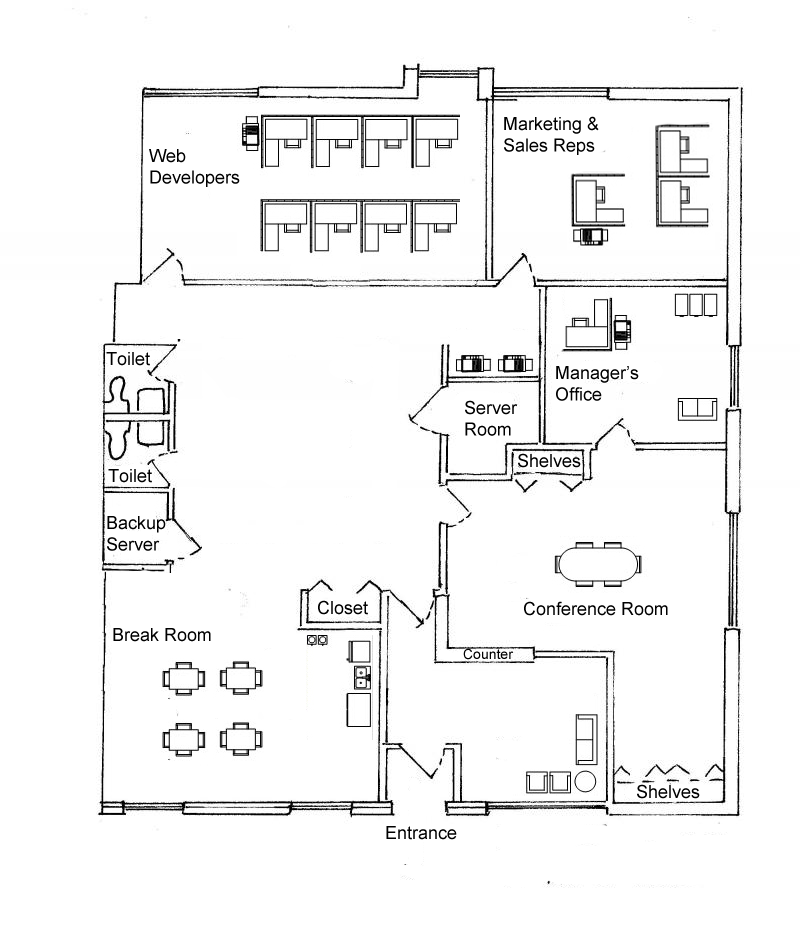
<style>
.page{position:relative;width:800px;height:940px;background:#ffffff}
.page>*{position:absolute;margin:0}
.t1{font:18px "ArialMT";color:#000000}
.t2{font:14px "ArialMT";color:#000000}
</style>
<div class="page">
<p class="t1" style="left:504px;top:116px;width:95px;height:39px">Marketing &amp;<br>Sales Reps</p>
<p class="t1" style="left:149px;top:149px;width:91px;height:38px">Web<br>Developers</p>
<p class="t1" style="left:106px;top:352px;width:44px;height:14px">Toilet</p>
<p class="t1" style="left:556px;top:366px;width:83px;height:35px">Manager’s<br>Office</p>
<p class="t1" style="left:465px;top:400px;width:53px;height:36px">Server<br>Room</p>
<p class="t1" style="left:518px;top:453px;width:63px;height:15px">Shelves</p>
<p class="t1" style="left:108px;top:469px;width:44px;height:14px">Toilet</p>
<p class="t1" style="left:107px;top:516px;width:59px;height:35px">Backup<br>Server</p>
<p class="t1" style="left:318px;top:600px;width:50px;height:15px">Closet</p>
<p class="t1" style="left:524px;top:601px;width:144px;height:15px">Conference Room</p>
<p class="t1" style="left:113px;top:628px;width:98px;height:14px">Break Room</p>
<p class="t2" style="left:463px;top:648px;width:51px;height:12px">Counter</p>
<p class="t1" style="left:637px;top:784px;width:63px;height:15px">Shelves</p>
<p class="t1" style="left:386px;top:826px;width:71px;height:14px">Entrance</p>
</div>
